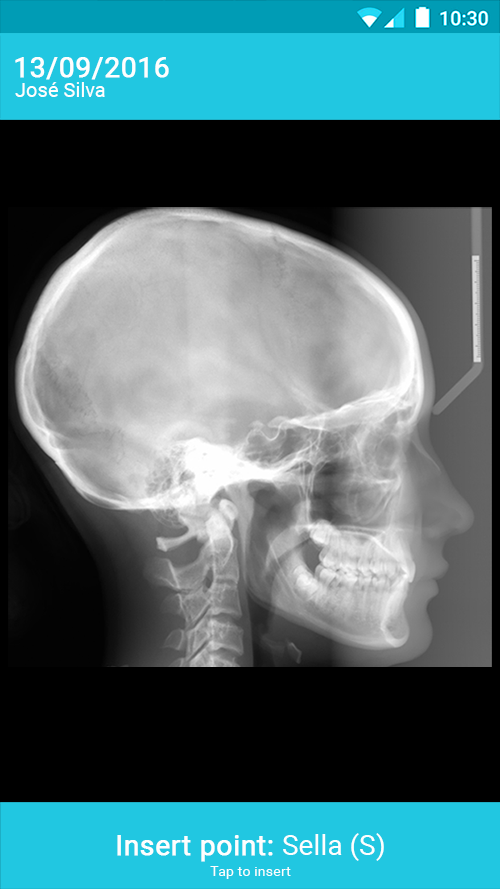
<style>
.page{position:relative;width:500px;height:889px;background:#000000}
.page>*{position:absolute;margin:0}
.t1{font:28.2px "Roboto-Regular";color:#fefefe;font-weight:bold}
.t2{font:20.1px "Roboto-Regular";color:#fefefe}
.t3{font:28.2px "Roboto-Regular";color:#fefefe}
.t4{font:14.5px "Roboto-Regular";color:#fefefe}
</style>
<div class="page">
<p class="t1" style="left:15px;top:57px;width:154px;height:23px">13/09/2016</p>
<p class="t2" style="left:15px;top:82px;width:90px;height:15px">José Silva</p>
<p class="t1" style="left:117px;top:833px;width:267px;height:29px">Insert point: <span class="t3">Sella (S)</span></p>
<p class="t4" style="left:210px;top:866px;width:81px;height:13px">Tap to insert</p>
</div>
